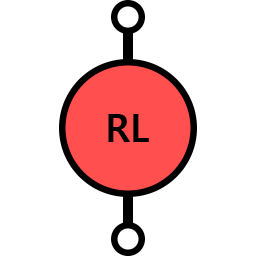
<style>
.page{position:relative;width:256px;height:256px;background:#ffffff}
.page>*{position:absolute;margin:0}
.t1{font:37.5px "MalgunGothicBold";color:#000000}
</style>
<div class="page">
<p class="t1" style="left:108px;top:114px;width:41px;height:28px">RL</p>
</div>
